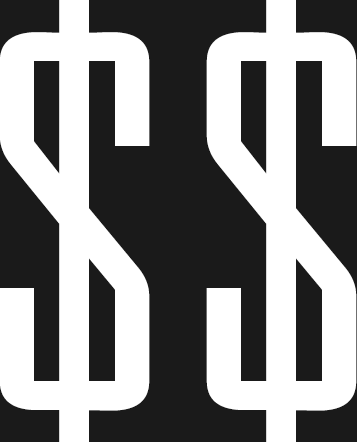
<style>
.page{position:relative;width:357px;height:442px;background:#1a1a1a}
.page>*{position:absolute;margin:0}
.t1{font:500px "AgencyFB-Reg";color:#ffffff}
</style>
<div class="page">
<p class="t1" style="left:0px;top:0px;width:357px;height:442px">$$</p>
</div>
